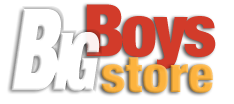
<style>
.page{position:relative;width:234px;height:104px;background:#ffffff}
.page>*{position:absolute;margin:0}
.t1{font:72px "HelveticaNeueLTPro-BlkCn";letter-spacing:-0.05em;color:#cf2c1a}
.t2{font:72px "HelveticaNeueLTPro-BlkCnO";letter-spacing:-0.05em;color:#ffffff;font-weight:bold}
.t3{font:110.4px "HelveticaNeueLTPro-BlkCnO";letter-spacing:-0.05em;color:#ffffff;font-variant:small-caps;font-weight:bold;scale:0.72 1}
.t4{font:110.4px "HelveticaNeueLTPro-BlkCnO";letter-spacing:-0.05em;color:#ffffff;font-weight:bold;scale:0.72 1}
.t5{font:49.7px "HelveticaNeueLTPro-BlkCn";color:#fcad30;scale:1.07 1}
</style>
<div class="page">
<p class="t1" style="left:86px;top:4px;width:130px;height:65px;opacity:0.93"><span class="t2">     </span>Boys</p>
<p class="t3" style="left:11px;top:9px;width:89px;height:82px;opacity:0.93"><span class="t4">B</span>ig</p>
<p class="t5" style="left:101px;top:57px;width:112px;height:36px;opacity:0.93"><span class="t2">             </span>store</p>
</div>
